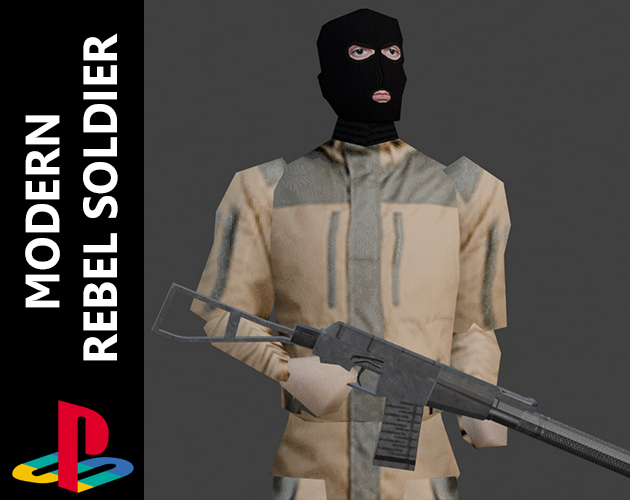
<style>
.page{position:relative;width:630px;height:500px;background:#404040}
.page>*{position:absolute;margin:0}
.t1{font:48px "Leelawadee-Bold";color:#ffffff;text-transform:uppercase;scale:0.96 1}
</style>
<div class="page">
<p class="t1" style="left:25px;top:33px;width:93px;height:328px;text-align:center;rotate:-90deg">Modern  <br>Rebel Soldier</p>
</div>
